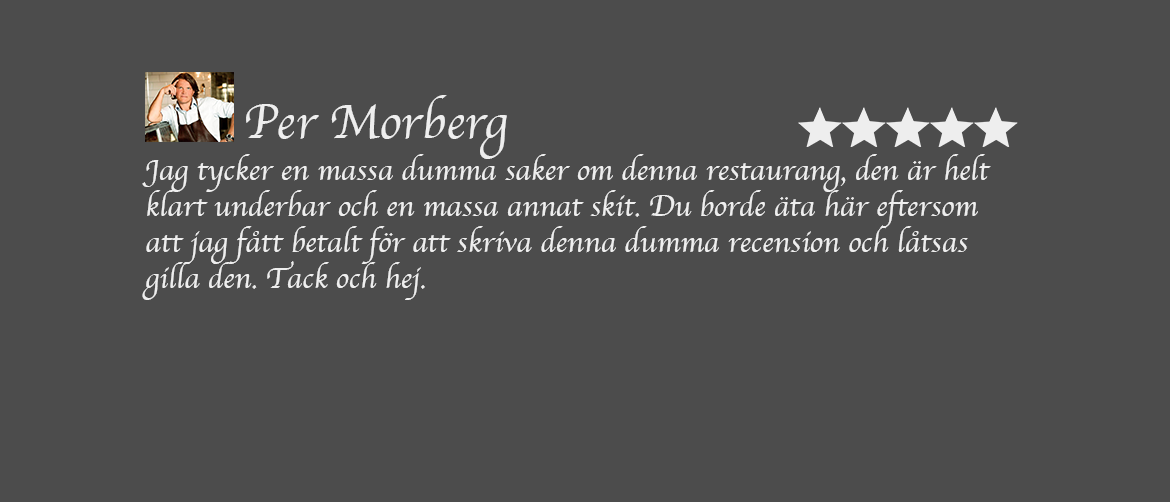
<style>
.page{position:relative;width:1170px;height:502px;background:#4c4c4c}
.page>*{position:absolute;margin:0}
.t1{font:50px "Apple-Chancery";color:#eeeeee}
.t2{font:30px "Apple-Chancery";color:#eeeeee}
</style>
<div class="page">
<p class="t1" style="left:246px;top:95px;width:261px;height:64px">Per Morberg</p>
<p class="t2" style="left:142px;top:154px;width:849px;height:146px">Jag tycker en massa dumma saker om denna restaurang, den är helt klart underbar och en massa annat skit. Du borde äta här eftersom att jag fått betalt för att skriva denna dumma recension och låtsas gilla den. Tack och hej.</p>
</div>
